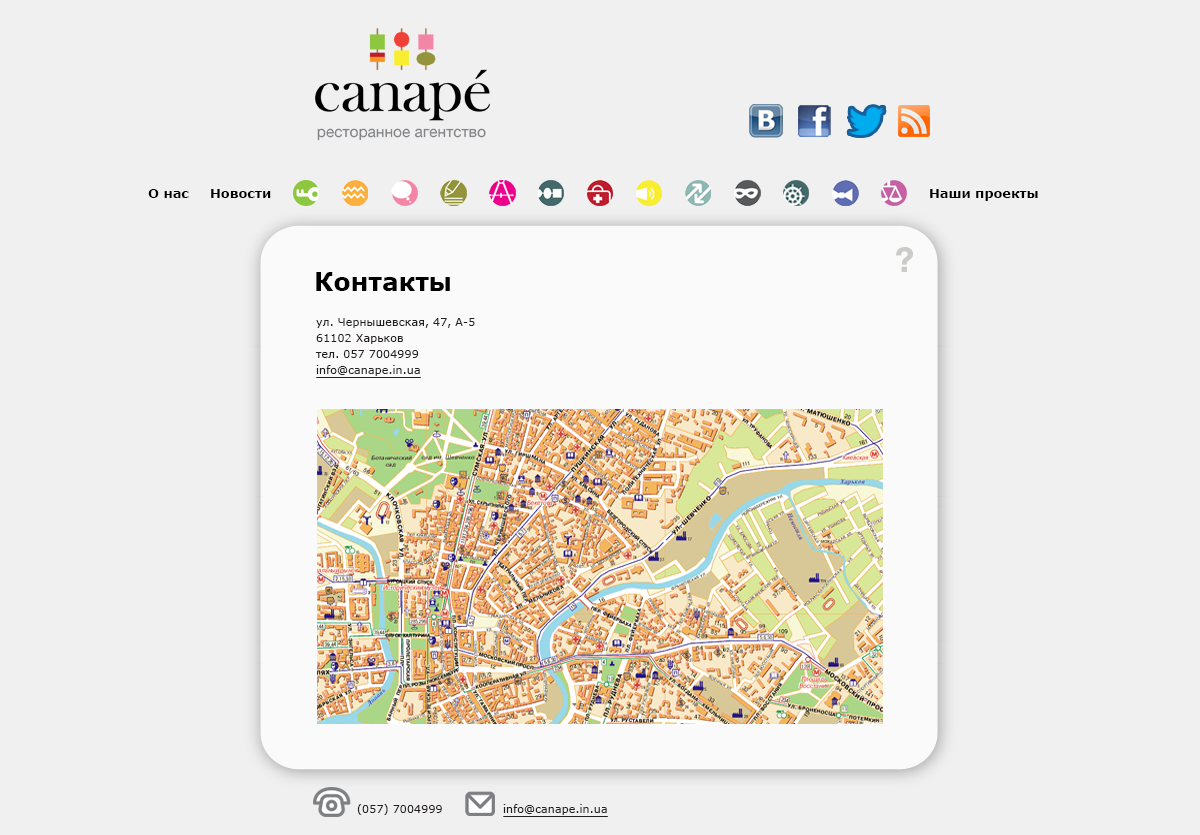
<style>
.page{position:relative;width:1200px;height:835px;background:#f0f0f0}
.page>*{position:absolute;margin:0}
.t1{font:12.9px "Verdana-Bold";color:#000000}
.t2{font:25px "Verdana-Bold";color:#000000}
.t3{font:11.2px/16.3px "Verdana";color:#231f20}
.t4{font:11.2px "Verdana";color:#231f20}
</style>
<div class="page">
<p class="t1" style="left:148px;top:189px;width:41px;height:9px">О нас</p>
<p class="t1" style="left:211px;top:189px;width:60px;height:9px">Новости</p>
<p class="t1" style="left:930px;top:189px;width:108px;height:12px">Наши проекты</p>
<p class="t2" style="left:316px;top:272px;width:134px;height:19px">Контакты</p>
<p class="t3" style="left:315px;top:318px;width:160px;height:58px">ул. Чернышевская, 47, А-5<br>61102 Харьков<br>тел. 057 7004999<br>info@canape.in.ua</p>
<p class="t4" style="left:357px;top:804px;width:85px;height:11px">(057) 7004999</p>
<p class="t4" style="left:503px;top:804px;width:104px;height:11px">info@canape.in.ua</p>
</div>
